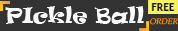
<style>
.page{position:relative;width:178px;height:31px;background:#333333}
.page>*{position:absolute;margin:0}
.t1{font:20px "Ravie";color:#fafafa}
.t2{font:8px "PalatinoLinotype-Roman";color:#ff9001;font-style:italic}
</style>
<div class="page">
<p class="t1" style="left:5px;top:6px;width:139px;height:18px">PIckle Ball</p>
<p class="t2" style="left:150px;top:18px;width:28px;height:7px">ORDER</p>
</div>
